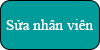
<style>
.page{position:relative;width:100px;height:50px;background:#009b9b}
.page>*{position:absolute;margin:0}
.t1{font:15.3px "TimesNewRomanPSMT";color:#fefefe}
</style>
<div class="page">
<p class="t1" style="left:6px;top:19px;width:87px;height:11px">Sửa nhân viên</p>
</div>
